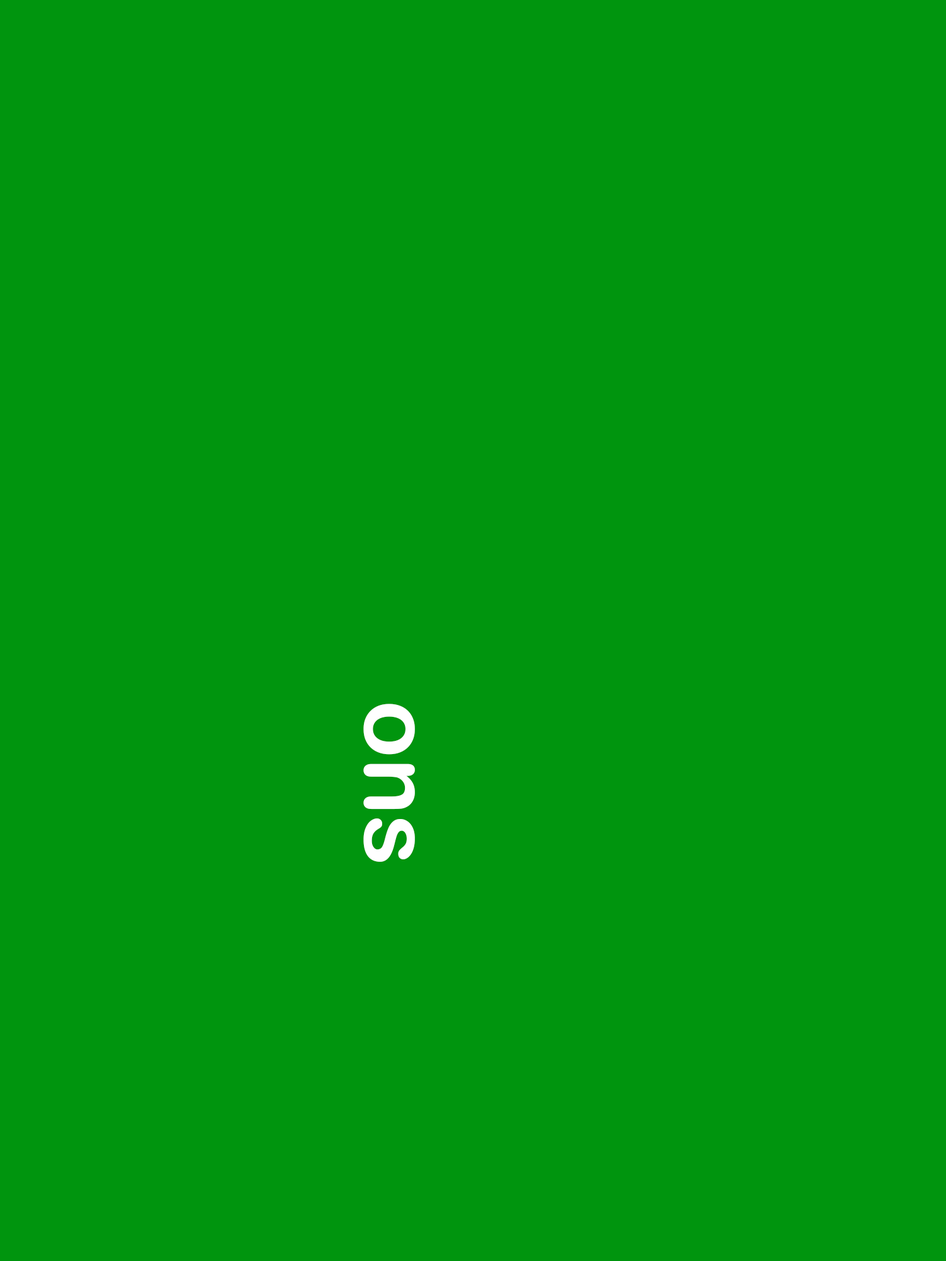
<style>
.page{position:relative;width:946px;height:1261px;background:#00950e}
.page>*{position:absolute;margin:0}
.t1{font:94.6px "ArialRoundedMTBold";color:#ffffff}
</style>
<div class="page">
<p class="t1" style="left:363px;top:704px;width:52px;height:158px;rotate:90deg">ons</p>
</div>
